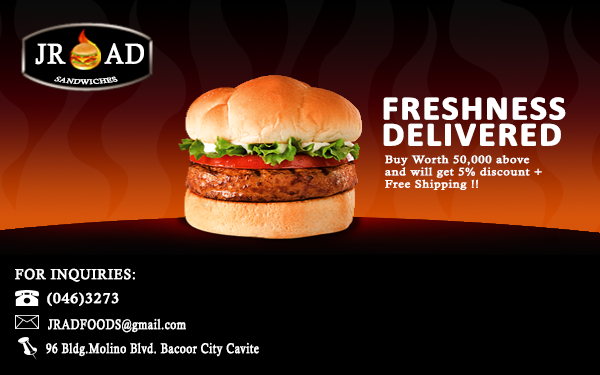
<style>
.page{position:relative;width:600px;height:375px;background:#000000}
.page>*{position:absolute;margin:0}
.t1{font:28px "CalistoMT";letter-spacing:0.04em;color:#ffffff;font-weight:bold;scale:0.86 1}
.t2{font:6.9px "CalistoMT";letter-spacing:0.04em;color:#ffffff;font-weight:bold;scale:1.25 1}
.t3{font:33.3px/26.2px "Calibri-Bold";letter-spacing:0.04em;color:#ffffff;font-weight:bold;scale:1.05 1}
.t4{font:10.7px/12.3px "CalistoMT";letter-spacing:0.04em;color:#ffffff;font-weight:bold;scale:1.13 1}
.t5{font:14.2px "CalistoMT";letter-spacing:0.04em;color:#ffffff;font-weight:bold;scale:0.95 1}
.t6{font:14px "CalistoMT";letter-spacing:0.04em;color:#ffffff;font-weight:bold;scale:1.08 1}
.t7{font:13.8px "CalistoMT";letter-spacing:0.04em;color:#ffffff;font-weight:bold;scale:0.77 1}
</style>
<div class="page">
<p class="t1" style="left:35px;top:43px;width:109px;height:22px">JR     AD</p>
<p class="t2" style="left:54px;top:76px;width:64px;height:9px;rotate:-5deg">SANDWICHES</p>
<p class="t3" style="left:383px;top:97px;width:183px;height:49px">FRESHNESS<br>DELIVERED</p>
<p class="t4" style="left:385px;top:155px;width:157px;height:35px">Buy Worth 50,000 above<br>and will get 5% discount +<br>Free Shipping !!</p>
<p class="t5" style="left:15px;top:268px;width:120px;height:14px">FOR INQUIRIES:</p>
<p class="t6" style="left:47px;top:292px;width:72px;height:14px">(046)3273</p>
<p class="t7" style="left:48px;top:318px;width:138px;height:15px">JRADFOODS@gmail.com</p>
<p class="t7" style="left:46px;top:342px;width:213px;height:15px">96 Bldg.Molino Blvd. Bacoor City Cavite</p>
</div>
